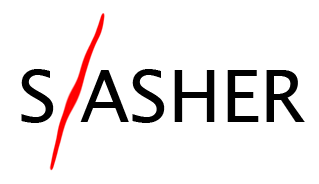
<style>
.page{position:relative;width:319px;height:184px;background:#ffffff}
.page>*{position:absolute;margin:0}
.t1{font:72px "LucidaSansUnicode";color:#000000}
</style>
<div class="page">
<p class="t1" style="left:21px;top:69px;width:284px;height:54px">S ASHER</p>
</div>
